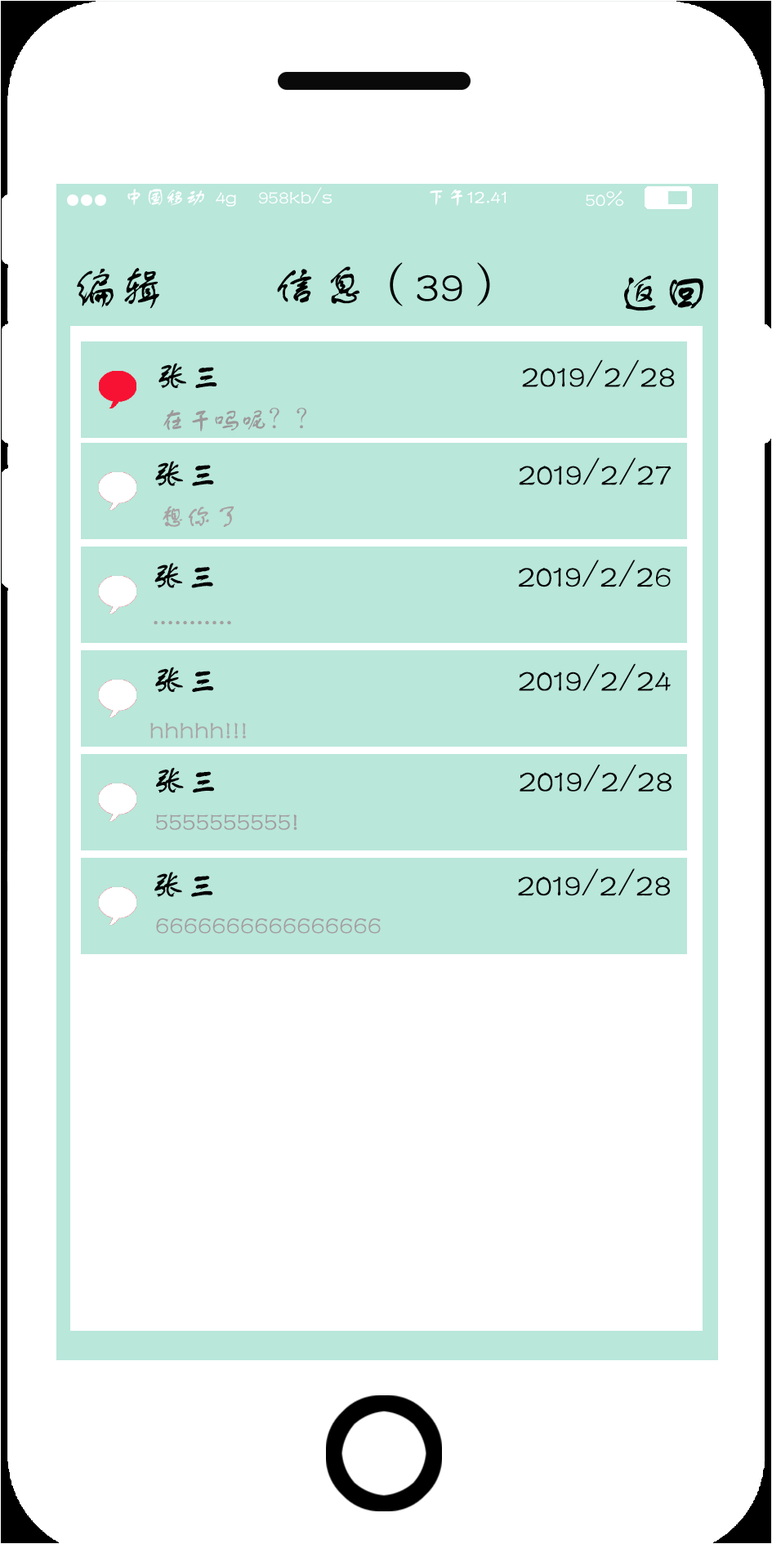
<style>
.page{position:relative;width:772px;height:1544px;background:#ffffff}
.page>*{position:absolute;margin:0}
.t1{font:47.7px "FZSTK--GBK1-0";color:#000000}
.t2{font:34px "FZSTK--GBK1-0";color:#030303}
.t3{font:27.2px "FZSTK--GBK1-0";color:#9c9899}
.t4{font:27.2px "FZSTK--GBK1-0";color:#a7a1a2}
.t5{font:27.2px "FZSTK--GBK1-0";color:#a39e9f}
.t6{font:27.2px "FZSTK--GBK1-0";color:#aaa7a7}
</style>
<div class="page">
<p class="t1" style="left:77px;top:267px;width:82px;height:42px">编辑</p>
<p class="t1" style="left:277px;top:262px;width:213px;height:44px">信息（39）</p>
<p class="t1" style="left:624px;top:275px;width:80px;height:36px">返回</p>
<p class="t2" style="left:159px;top:360px;width:516px;height:28px">张三                                   2019/2/28</p>
<p class="t3" style="left:163px;top:408px;width:143px;height:23px">在干吗呢？？</p>
<p class="t2" style="left:155px;top:458px;width:517px;height:28px">张三                                   2019/2/27</p>
<p class="t4" style="left:163px;top:506px;width:72px;height:21px">想你了</p>
<p class="t2" style="left:154px;top:560px;width:517px;height:28px">张三                                   2019/2/26</p>
<p class="t5" style="left:154px;top:621px;width:77px;height:4px">...........</p>
<p class="t2" style="left:155px;top:663px;width:516px;height:29px">张三                                   2019/2/24</p>
<p class="t6" style="left:150px;top:722px;width:96px;height:17px">hhhhh!!!</p>
<p class="t2" style="left:156px;top:765px;width:516px;height:28px">张三                                   2019/2/28</p>
<p class="t5" style="left:156px;top:815px;width:141px;height:15px">5555555555!</p>
<p class="t2" style="left:154px;top:869px;width:517px;height:28px">张三                                   2019/2/28</p>
<p class="t5" style="left:156px;top:918px;width:225px;height:16px">6666666666666666</p>
</div>
